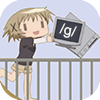
<style>
.page{position:relative;width:100px;height:100px;background:#d5daf0}
.page>*{position:absolute;margin:0}
.t1{font:14px "ArialMT";color:#ffffff}
</style>
<div class="page">
<p class="t1" style="left:59px;top:23px;width:18px;height:15px;rotate:11deg">/g/</p>
</div>
